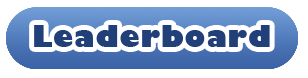
<style>
.page{position:relative;width:308px;height:78px;background:#ffffff}
.page>*{position:absolute;margin:0}
.t1{font:29.2px "GillSans-UltraBold";letter-spacing:0.025em;color:#213f79}
</style>
<div class="page">
<p class="t1" style="left:34px;top:25px;width:236px;height:22px">Leaderboard</p>
</div>
